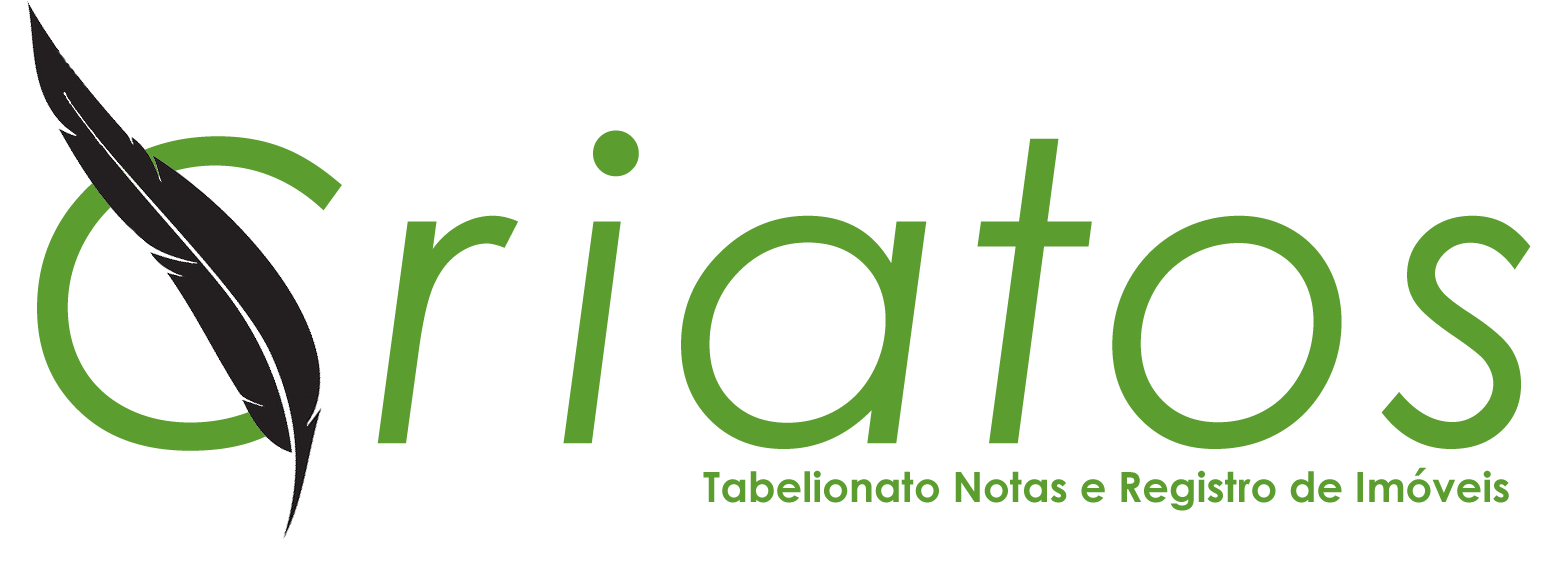
<style>
.page{position:relative;width:1568px;height:573px;background:#ffffff}
.page>*{position:absolute;margin:0}
.t1{font:41.7px "CenturyGothic-Bold";color:#5b9d2f}
</style>
<div class="page">
<p class="t1" style="left:703px;top:467px;width:806px;height:44px">Tabelionato Notas e Registro de Imóveis</p>
</div>
